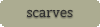
<style>
.page{position:relative;width:100px;height:27px;background:#acac91}
.page>*{position:absolute;margin:0}
.t1{font:14px "CherrySwash-Regular";color:#303030}
</style>
<div class="page">
<p class="t1" style="left:27px;top:9px;width:46px;height:9px">scarves</p>
</div>
